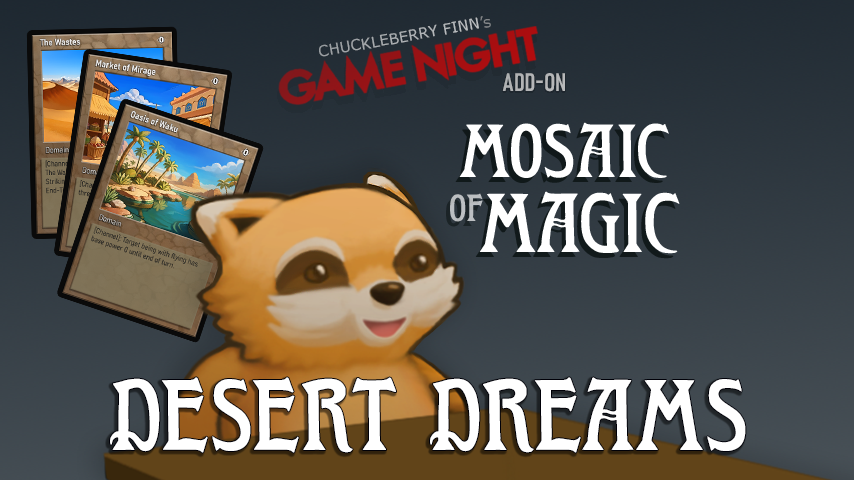
<style>
.page{position:relative;width:854px;height:480px}
.page>*{position:absolute;margin:0}
.t1{font:15px "Verdana";color:#ffffff}
.t2{font:15px "Verdana";color:#ababab}
.t3{font:25px "Bahnschrift-SemiBoldCondensed";color:#b4b5b7}
.t4{font:75px/58.3px "WTRRoycroft";color:#ffffff}
.t5{font:83.3px/75px "WTRRoycroft";color:#ffffff}
.t6{font:37.5px "WTRRoycroft";color:#bcbfc2}
.t7{font:100px "WTRRoycroft";color:#ffffff}
</style>
<div class="page">
<p class="t1" style="left:319px;top:16px;width:172px;height:41px;rotate:-10deg">CHUCKLEBERRY FINN<span class="t2">’s</span></p>
<p class="t3" style="left:502px;top:73px;width:63px;height:19px">ADD-ON</p>
<p class="t4" style="left:459px;top:122px;width:221px;height:132px;text-align:center">Mosaic<br>  <span class="t5">Magic</span></p>
<p class="t6" style="left:450px;top:193px;width:33px;height:29px">of</p>
<p class="t7" style="left:110px;top:377px;width:636px;height:76px">DESERT DREAMS</p>
</div>
